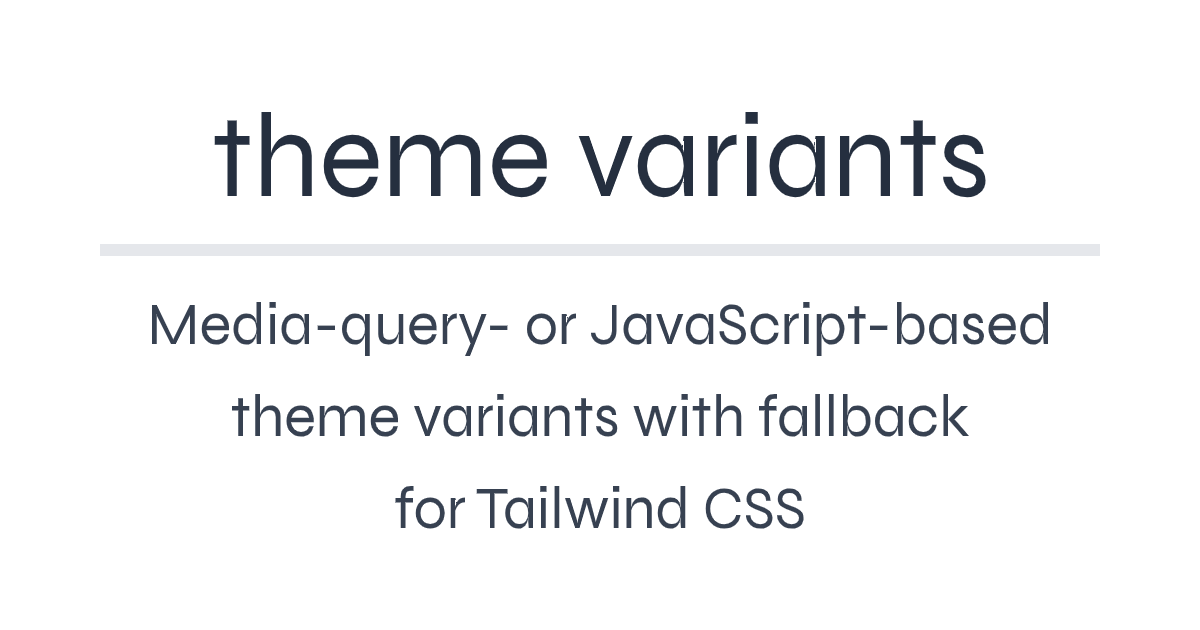
<style>
.page{position:relative;width:1200px;height:630px;background:#ffffff}
.page>*{position:absolute;margin:0}
.t1{font:120px "Syne-Regular";color:#252f3f}
.t2{font:60px/92px "Syne-Regular";color:#374151}
</style>
<div class="page">
<p class="t1" style="left:214px;top:112px;width:772px;height:86px">theme variants</p>
<p class="t2" style="left:152px;top:301px;width:896px;height:228px;text-align:center">Media-query- or JavaScript-based<br>theme variants with fallback<br> for Tailwind CSS</p>
</div>
